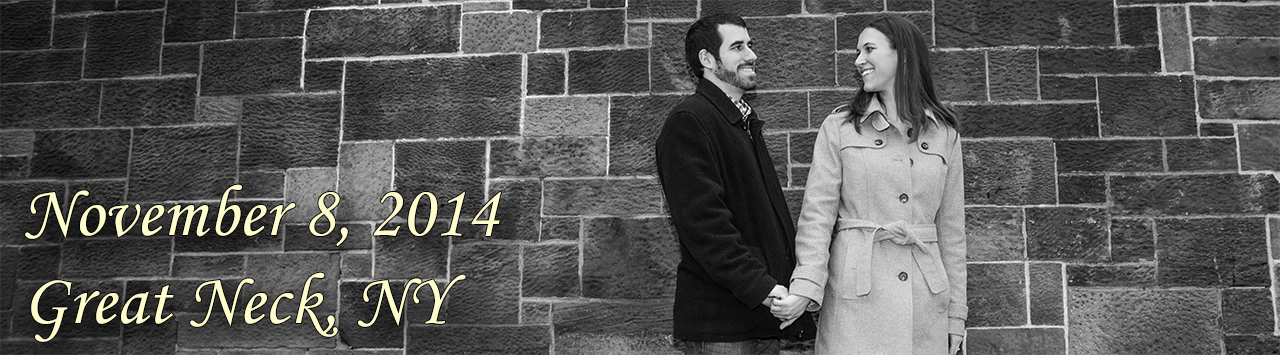
<style>
.page{position:relative;width:1280px;height:355px}
.page>*{position:absolute;margin:0}
.t1{font:73.3px "MonotypeCorsiva";letter-spacing:0.005em;color:#fefbcc}
</style>
<div class="page">
<p class="t1" style="left:25px;top:184px;width:476px;height:158px">November 8, 2014<br>Great Neck, NY</p>
</div>
